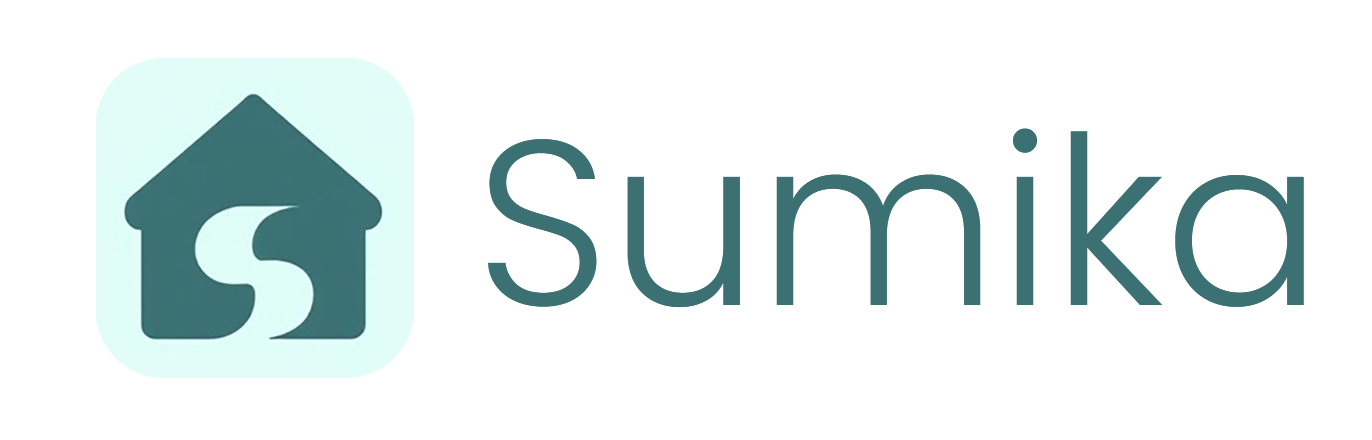
<style>
.page{position:relative;width:1372px;height:440px;background:#ffffff}
.page>*{position:absolute;margin:0}
.t1{font:234.7px "Poppins-Light";color:#3b7173}
</style>
<div class="page">
<p class="t1" style="left:488px;top:128px;width:816px;height:180px">Sumika</p>
</div>
